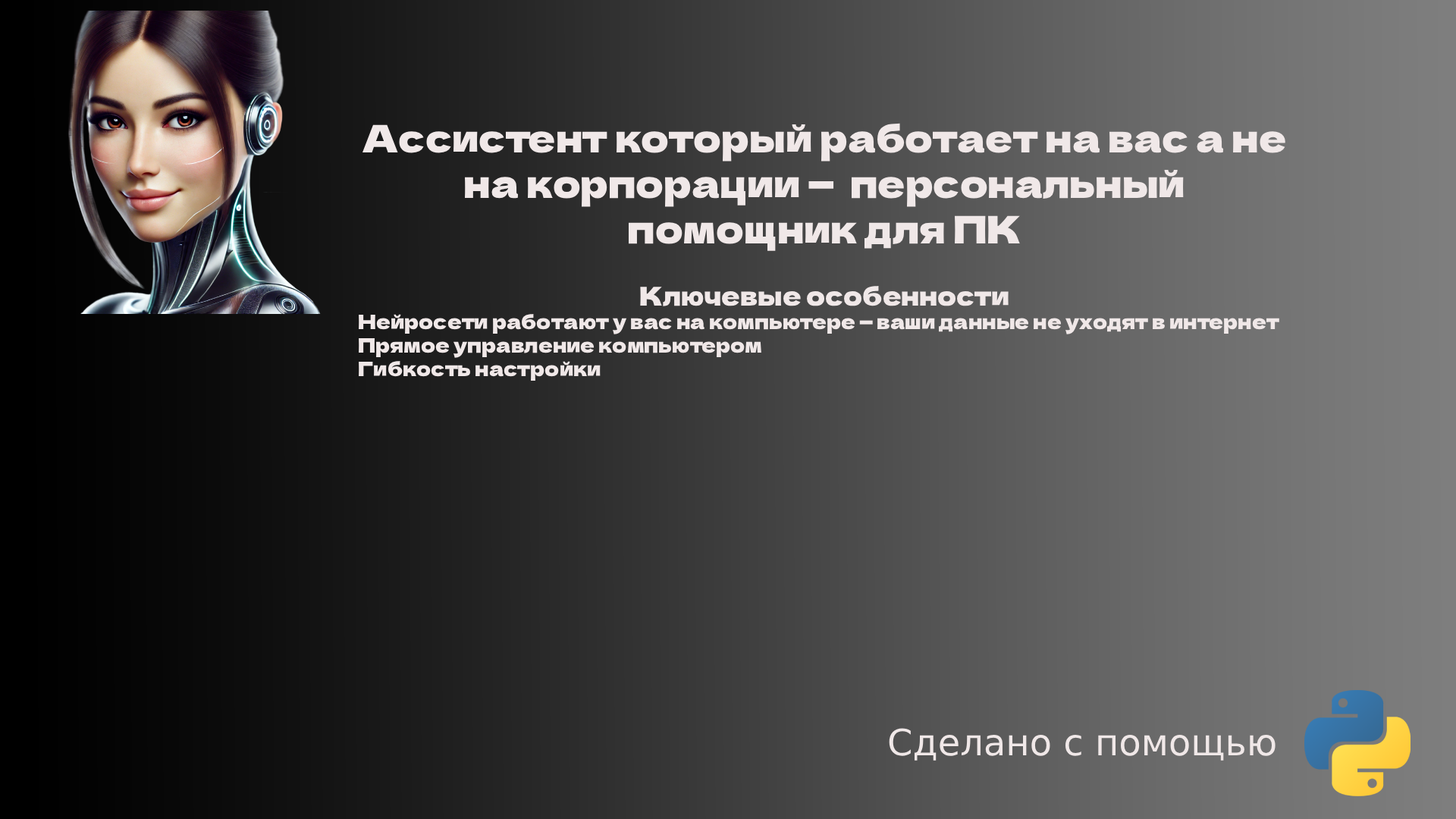
<style>
.page{position:relative;width:1456px;height:819px}
.page>*{position:absolute;margin:0}
.t1{font:19.7px "DelaGothicOne-Regular";color:#f0e8e8}
.t2{font:37.9px "DelaGothicOne-Regular";color:#f0e8e8}
.t3{font:25.8px "DelaGothicOne-Regular";color:#f0e8e8}
.t4{font:36.4px "DejaVuSans";color:#f0e8e8}
</style>
<div class="page">
<p class="t1" style="left:359px;top:123px;width:926px;height:258px;text-align:center"><span class="t2">Ассистент который работает на вас а не на корпорации —  персональный помощник для ПК<br><br></span><span class="t3">Ключевые особенности<br></span>Нейросети работают у вас на компьютере — ваши данные не уходят в интернет<br>Прямое управление компьютером<br>Гибкость настройки</p>
<p class="t4" style="left:889px;top:728px;width:386px;height:33px">Сделано с помощью</p>
</div>
